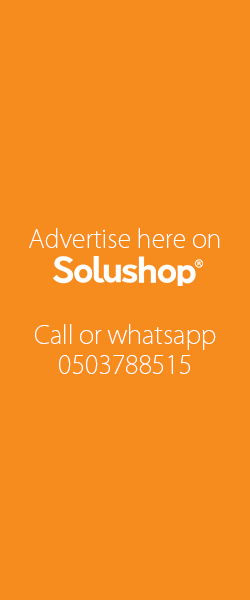
<style>
.page{position:relative;width:250px;height:600px;background:#f68b1e}
.page>*{position:absolute;margin:0}
.t1{font:25px "KozGoPro-ExtraLight";color:#ffffff}
</style>
<div class="page">
<p class="t1" style="left:29px;top:228px;width:191px;height:20px">Advertise here on</p>
<p class="t1" style="left:35px;top:324px;width:181px;height:50px;text-align:center">Call or whatsapp<br>0503788515</p>
</div>
